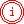
<style>
.page{position:relative;width:24px;height:24px;background:#ffffff}
.page>*{position:absolute;margin:0}
.t1{font:10px "Dogica_Pixel";letter-spacing:-0.02em;color:#ff0000;font-weight:bold}
</style>
<div class="page">
<p class="t1" style="left:10px;top:7px;width:4px;height:9px">i</p>
</div>
